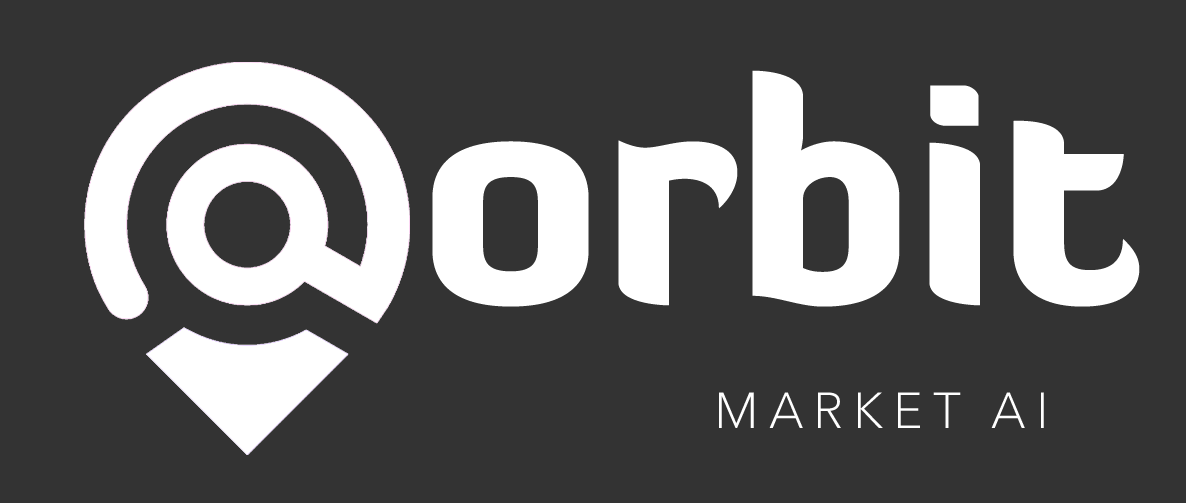
<style>
.page{position:relative;width:1186px;height:503px;background:#333333}
.page>*{position:absolute;margin:0}
.t1{font:300px "DiavloBlack-Regular";color:#ffffff}
.t2{font:50px "AvenirNextLTPro-Light";letter-spacing:0.2em;color:#ffffff}
</style>
<div class="page">
<p class="t1" style="left:432px;top:70px;width:708px;height:237px">orbit</p>
<p class="t2" style="left:719px;top:392px;width:325px;height:36px">MARKET AI</p>
</div>
